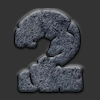
<style>
.page{position:relative;width:100px;height:100px;background:#333333}
.page>*{position:absolute;margin:0}
.t1{font:100px "JFRockSolid"}
</style>
<div class="page">
<p class="t1" style="left:15px;top:10px;width:68px;height:82px">2</p>
</div>
